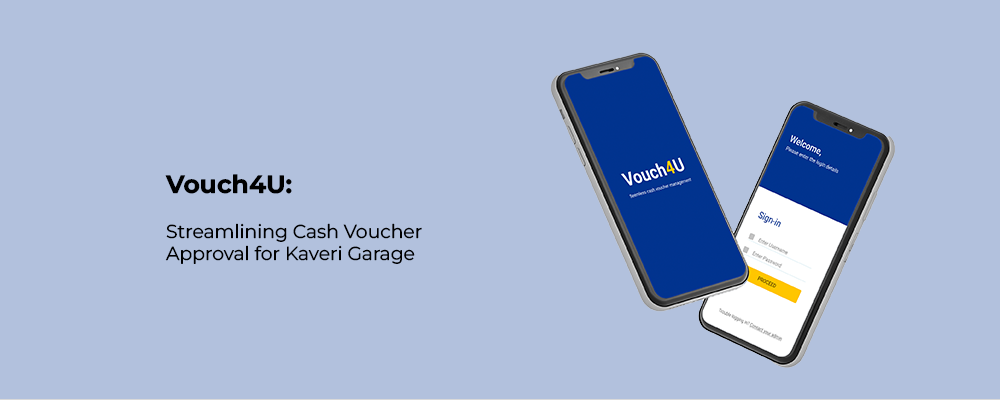
<style>
.page{position:relative;width:1000px;height:400px;background:#b2c1dd}
.page>*{position:absolute;margin:0}
.t1{font:18.7px "MontserratThin-Regular";color:#000000}
.t2{font:25px "MontserratThin-Bold";color:#000000}
</style>
<div class="page">
<p class="t1" style="left:165px;top:174px;width:257px;height:90px"><span class="t2">Vouch4U: <br><br></span>Streamlining Cash Voucher Approval for Kaveri Garage</p>
</div>
